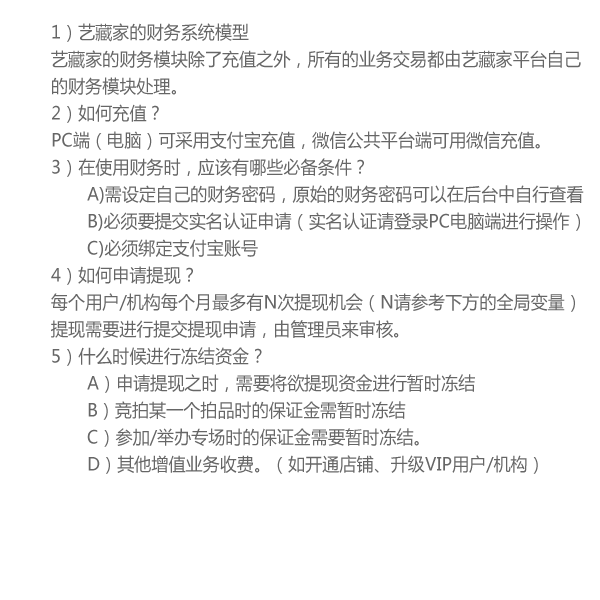
<style>
.page{position:relative;width:600px;height:600px;background:#ffffff}
.page>*{position:absolute;margin:0}
.t1{font:18px/27px "MicrosoftYaHei";color:#666666;scale:0.95 1}
</style>
<div class="page">
<p class="t1" style="left:51px;top:23px;width:533px;height:451px">1）艺藏家的财务系统模型<br>艺藏家的财务模块除了充值之外，所有的业务交易都由艺藏家平台自己<br>的财务模块处理。<br>2）如何充值？<br>PC端（电脑）可采用支付宝充值，微信公共平台端可用微信充值。<br>3）在使用财务时，应该有哪些必备条件？<br> A)需设定自己的财务密码，原始的财务密码可以在后台中自行查看<br> B)必须要提交实名认证申请（实名认证请登录PC电脑端进行操作）<br> C)必须绑定支付宝账号<br>4）如何申请提现？<br>每个用户/机构每个月最多有N次提现机会（N请参考下方的全局变量）<br>提现需要进行提交提现申请，由管理员来审核。<br>5）什么时候进行冻结资金？<br> A）申请提现之时，需要将欲提现资金进行暂时冻结<br> B）竞拍某一个拍品时的保证金需暂时冻结<br> C）参加/举办专场时的保证金需要暂时冻结。<br> D）其他增值业务收费。（如开通店铺、升级VIP用户/机构）</p>
</div>
